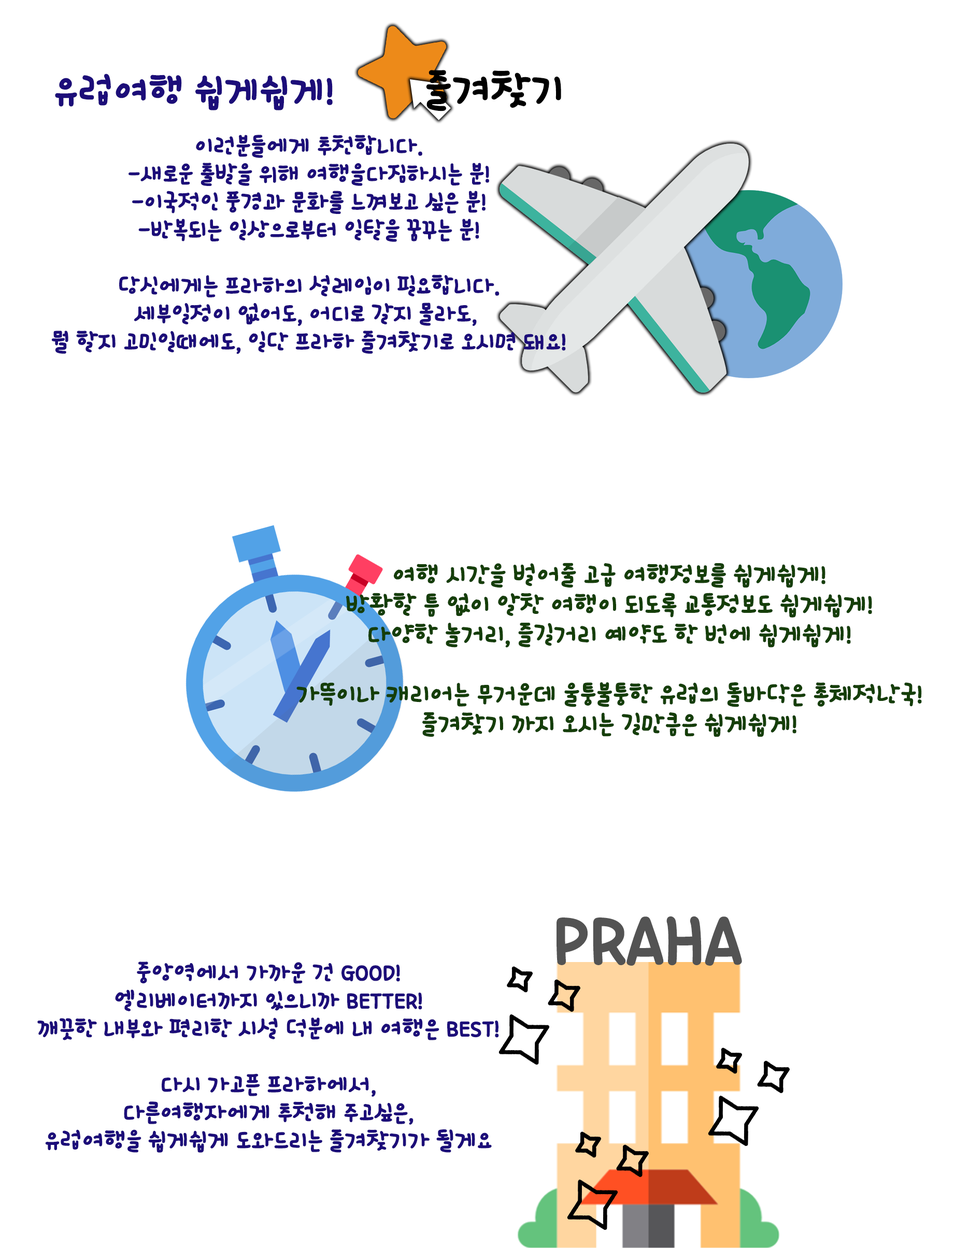
<style>
.page{position:relative;width:955px;height:1248px;background:#ffffff}
.page>*{position:absolute;margin:0}
.t1{font:23.3px "TTEuropeyeohaengB";color:#1c0d79}
.t2{font:37.3px "TTEuropeyeohaengB";color:#1c0d79}
.t3{font:41.5px "TTEuropeyeohaengB";color:#000000}
.t4{font:24.9px "TTEuropeyeohaengB";color:#153e09}
.t5{font:71.1px "TTEuropeyeohaengB";color:#535353}
</style>
<div class="page">
<p class="t1" style="left:51px;top:70px;width:515px;height:284px;text-align:center"><span class="t2">유럽여행 쉽게쉽게!         </span><span class="t3">즐겨찾기<br><br></span>이런분들에게 추천합니다.<br>-새로운 출발을 위해 여행을다짐하시는 분!<br>-이국적인 풍경과 문화를 느껴보고 싶은 분!<br>-반복되는 일상으로부터 일탈을 꿈꾸는 분!<br><br>당신에게는 프라하의 설레임이 필요합니다.<br>세부일정이 없어도, 어디로 갈지 몰라도, <br>뭘 할지 고민일때에도, 일단 프라하 즐겨찾기로 오시면 돼요!</p>
<p class="t4" style="left:296px;top:563px;width:626px;height:174px;text-align:center">여행 시간을 벌어줄 고급 여행정보를 쉽게쉽게!<br>방황할 틈 없이 알찬 여행이 되도록 교통정보도 쉽게쉽게!<br>다양한 놀거리, 즐길거리 예약도 한 번에 쉽게쉽게!<br><br>가뜩이나 캐리어는 무거운데 울퉁불퉁한 유럽의 돌바닥은 총체적난국!<br>즐겨찾기 까지 오시는 길만큼은 쉽게쉽게!</p>
<p class="t5" style="left:557px;top:916px;width:185px;height:50px">PRAHA</p>
<p class="t1" style="left:37px;top:962px;width:462px;height:191px;text-align:center">중앙역에서 가까운 건 GOOD!<br>엘리베이터까지 있으니까 BETTER!<br>깨끗한 내부와 편리한 시설 덕분에 내 여행은 BEST!<br><br>다시 가고픈 프라하에서,<br>다른여행자에게 추천해 주고싶은,<br>유럽여행을 쉽게쉽게 도와드리는 즐겨찾기가 될게요</p>
</div>
